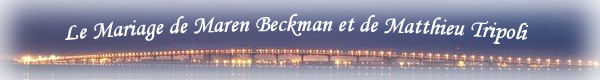
<style>
.page{position:relative;width:600px;height:80px}
.page>*{position:absolute;margin:0}
.t1{font:24px "MonotypeCorsiva";color:#ffffff}
</style>
<div class="page">
<p class="t1" style="left:65px;top:13px;width:464px;height:31px">Le Mariage de Maren Beckman et de Matthieu Tripoli</p>
</div>
